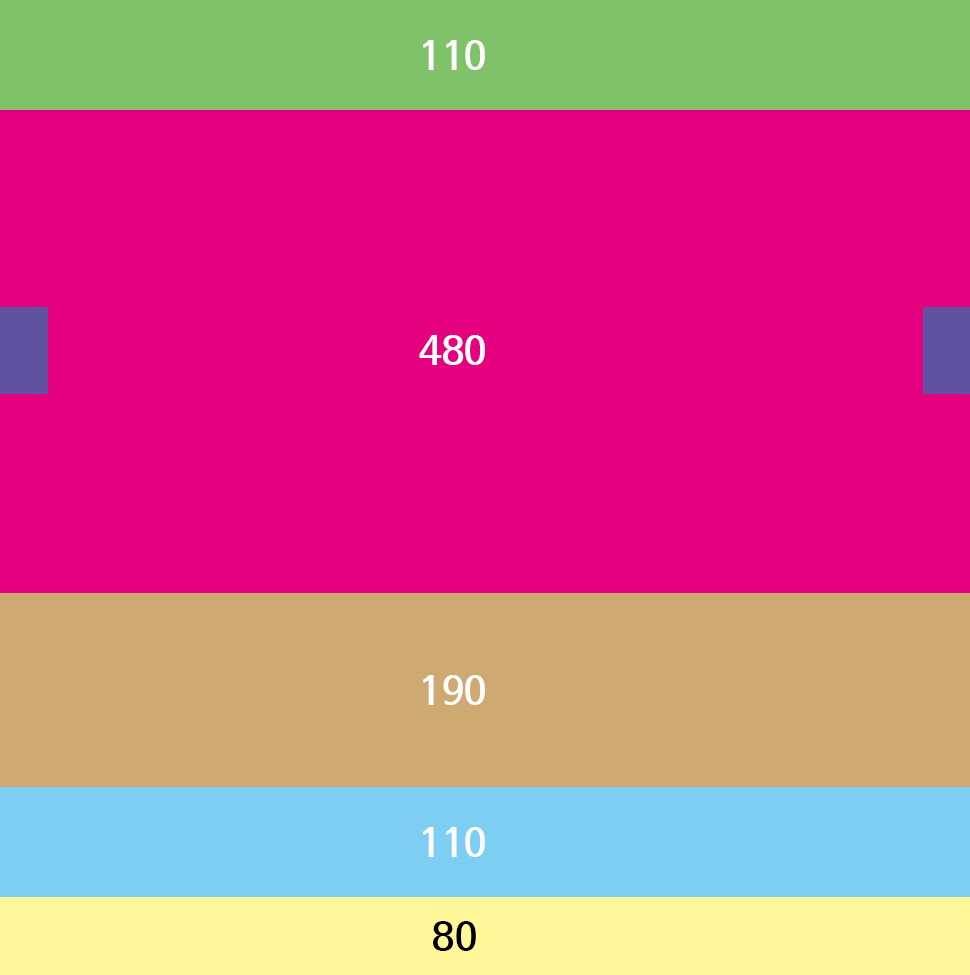
<style>
.page{position:relative;width:970px;height:975px;background:#e4007f}
.page>*{position:absolute;margin:0}
.t1{font:38px "NanumBarunGothicBold";color:#ffffff}
.t2{font:38px "NanumBarunGothicBold";color:#000000}
</style>
<div class="page">
<p class="t1" style="left:423px;top:40px;width:62px;height:30px">110</p>
<p class="t1" style="left:419px;top:335px;width:66px;height:30px">480</p>
<p class="t1" style="left:423px;top:675px;width:62px;height:30px">190</p>
<p class="t1" style="left:423px;top:827px;width:62px;height:30px">110</p>
<p class="t2" style="left:433px;top:921px;width:43px;height:30px">80</p>
</div>
